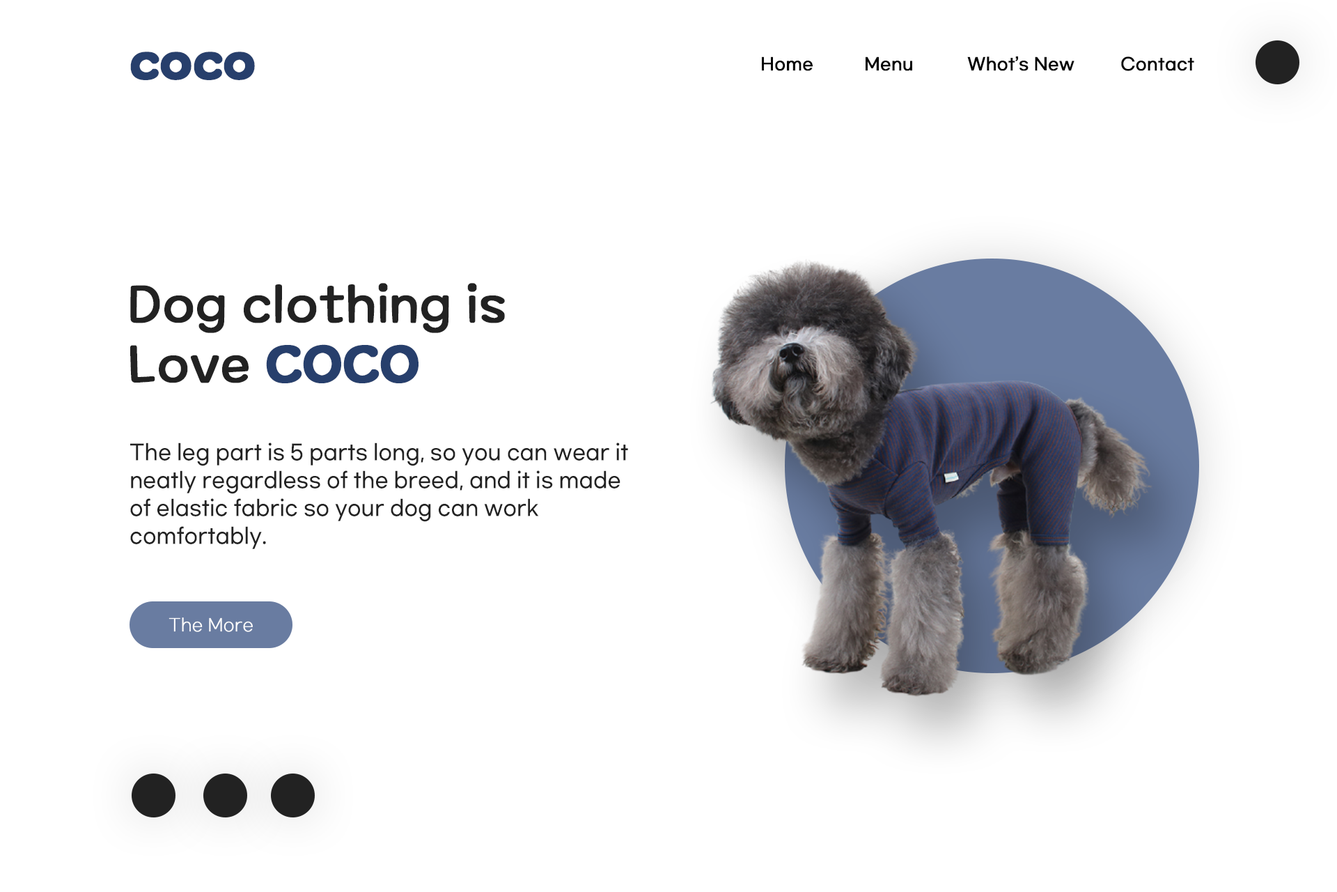
<style>
.page{position:relative;width:1337px;height:892px;background:#ffffff}
.page>*{position:absolute;margin:0}
.t1{font:50.2px "MaplestoryBold";color:#273f6c;font-weight:bold}
.t2{font:16.7px "GmarketSansTTFMedium";color:#050505;font-weight:bold;scale:0.95 1}
.t3{font:50.2px "MaplestoryLight";color:#222222;font-weight:bold}
.t4{font:20.9px/27.9px "GmarketSansTTFMedium";color:#222222;scale:0.95 1}
.t5{font:16.7px "GmarketSansTTFLight";color:#ffffff;font-weight:bold;scale:0.95 1}
</style>
<div class="page">
<p class="t1" style="left:130px;top:52px;width:125px;height:28px">coco</p>
<p class="t2" style="left:762px;top:56px;width:51px;height:15px">Home</p>
<p class="t2" style="left:866px;top:56px;width:46px;height:15px">Menu</p>
<p class="t2" style="left:968px;top:56px;width:107px;height:15px">Whot’s New</p>
<p class="t2" style="left:1121px;top:56px;width:74px;height:15px">Contact</p>
<p class="t3" style="left:130px;top:283px;width:375px;height:100px">Dog clothing is<br>Love <span class="t1">COCO</span></p>
<p class="t4" style="left:130px;top:442px;width:498px;height:107px">The leg part is 5 parts long, so you can wear it neatly regardless of the breed, and it is made of elastic fabric so your dog can work comfortably.</p>
<p class="t5" style="left:169px;top:617px;width:84px;height:15px">The More</p>
</div>
